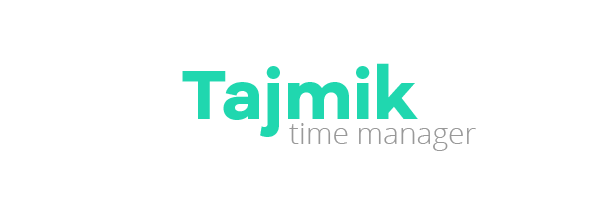
<style>
.page{position:relative;width:600px;height:200px;background:#ffffff}
.page>*{position:absolute;margin:0}
.t1{font:72px "GalanoGrotesqueAltDEMO-Bold";color:#20d7af}
.t2{font:30px "OpenSans-Light";color:#999999}
</style>
<div class="page">
<p class="t1" style="left:182px;top:63px;width:236px;height:74px">Tajmik</p>
<p class="t2" style="left:289px;top:123px;width:187px;height:28px">time manager</p>
</div>
